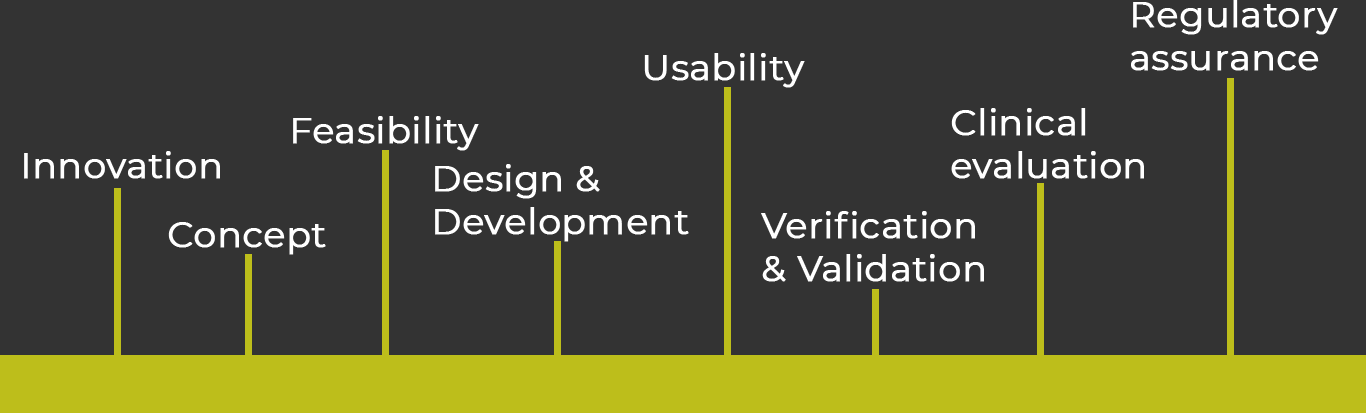
<style>
.page{position:relative;width:1366px;height:413px;background:#333333}
.page>*{position:absolute;margin:0}
.t1{font:36px "Montserrat-Regular";color:#ffffff;font-weight:bold}
</style>
<div class="page">
<p class="t1" style="left:1131px;top:0px;width:207px;height:71px">Regulatory<br>assurance</p>
<p class="t1" style="left:644px;top:53px;width:161px;height:35px">Usability</p>
<p class="t1" style="left:951px;top:108px;width:193px;height:71px">Clinical<br>evaluation</p>
<p class="t1" style="left:293px;top:116px;width:186px;height:35px">Feasibility</p>
<p class="t1" style="left:24px;top:151px;width:196px;height:28px">Innovation</p>
<p class="t1" style="left:435px;top:164px;width:254px;height:78px">Design &amp;<br>Development</p>
<p class="t1" style="left:168px;top:222px;width:158px;height:33px">Concept</p>
<p class="t1" style="left:761px;top:211px;width:223px;height:71px">Verification<br>&amp; Validation</p>
</div>
